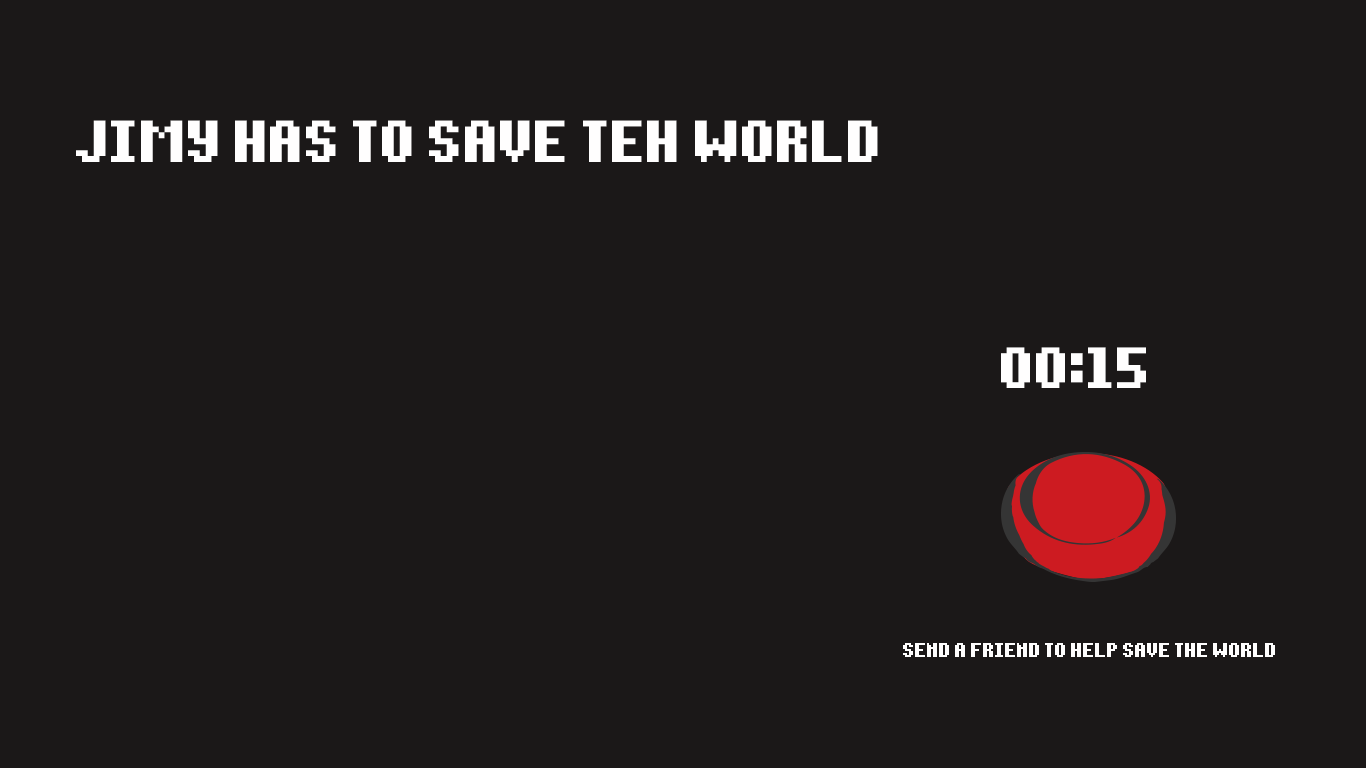
<style>
.page{position:relative;width:1366px;height:768px;background:#1b1818}
.page>*{position:absolute;margin:0}
.t1{font:92.4px "Notalot35";color:#fffefe;text-transform:uppercase}
.t2{font:32px "Notalot35";color:#fffefe;text-transform:uppercase}
</style>
<div class="page">
<p class="t1" style="left:1001px;top:347px;width:145px;height:41px">00:15</p>
<p class="t2" style="left:903px;top:643px;width:372px;height:14px">SEND A FRIEND TO HELP SAVE THE WORLD</p>
</div>
